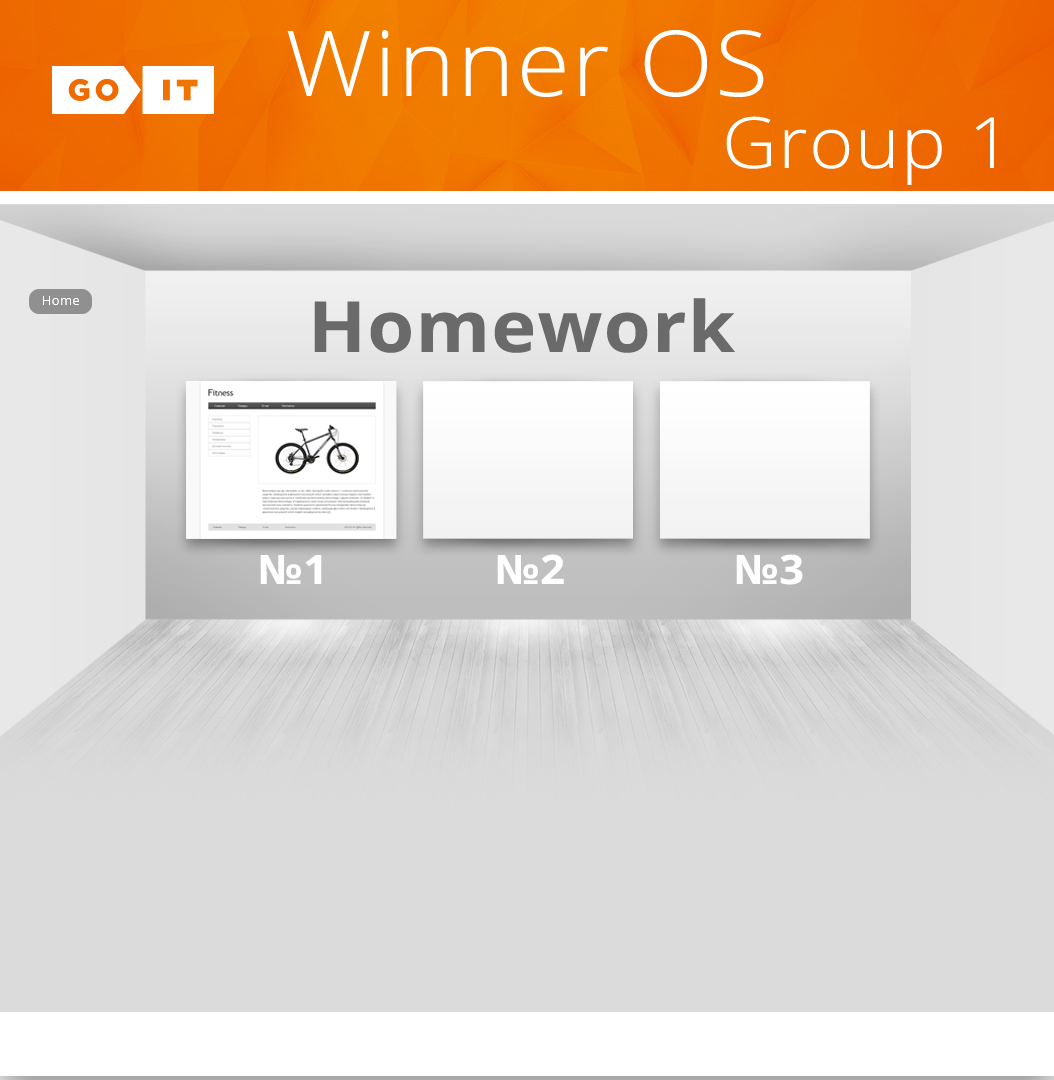
<style>
.page{position:relative;width:1054px;height:1080px;background:#dbdbdb}
.page>*{position:absolute;margin:0}
.t1{font:90.9px "OpenSans-Light";letter-spacing:0.02em;color:#ffffff;scale:1.07 1}
.t2{font:70.7px "OpenSans-Light";letter-spacing:0.02em;color:#ffffff;scale:1.07 1}
.t3{font:13.3px "OpenSans";color:#ffffff}
.t4{font:70.7px "OpenSans-Bold";letter-spacing:0.02em;color:#6a6a6a;scale:1.07 1}
.t5{font:40.4px "OpenSans-Bold";letter-spacing:0.02em;color:#ffffff;scale:1.07 1}
</style>
<div class="page">
<p class="t1" style="left:287px;top:30px;width:477px;height:67px">Winner OS</p>
<p class="t2" style="left:726px;top:116px;width:268px;height:69px">Group 1</p>
<p class="t3" style="left:43px;top:296px;width:36px;height:9px">Home</p>
<p class="t4" style="left:314px;top:298px;width:421px;height:55px">Homework</p>
<p class="t5" style="left:260px;top:555px;width:62px;height:29px">№1</p>
<p class="t5" style="left:497px;top:554px;width:67px;height:30px">№2</p>
<p class="t5" style="left:736px;top:554px;width:67px;height:31px">№3</p>
</div>
